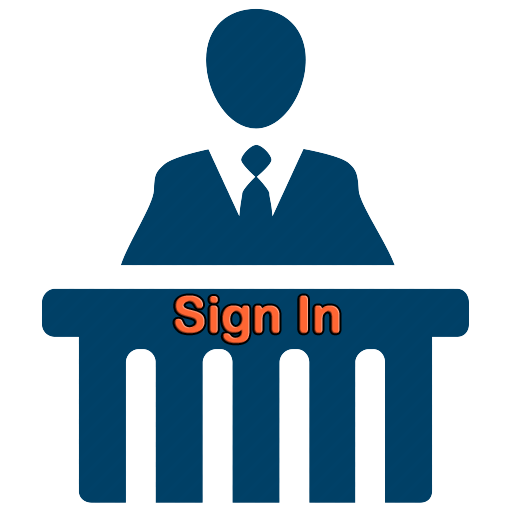
<style>
.page{position:relative;width:512px;height:512px;background:#ffffff}
.page>*{position:absolute;margin:0}
.t1{font:50px "ArialRoundedMTBold";letter-spacing:-0.025em;color:#ff6633;font-weight:bold}
</style>
<div class="page">
<p class="t1" style="left:174px;top:295px;width:166px;height:49px">Sign In</p>
</div>
